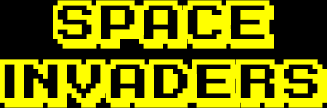
<style>
.page{position:relative;width:327px;height:108px;background:#000000}
.page>*{position:absolute;margin:0}
.t1{font:49.3px "KarmaticArcade";color:#ffff00}
</style>
<div class="page">
<p class="t1" style="left:0px;top:0px;width:327px;height:108px;text-align:center">SPACE<br>INVADERS</p>
</div>
